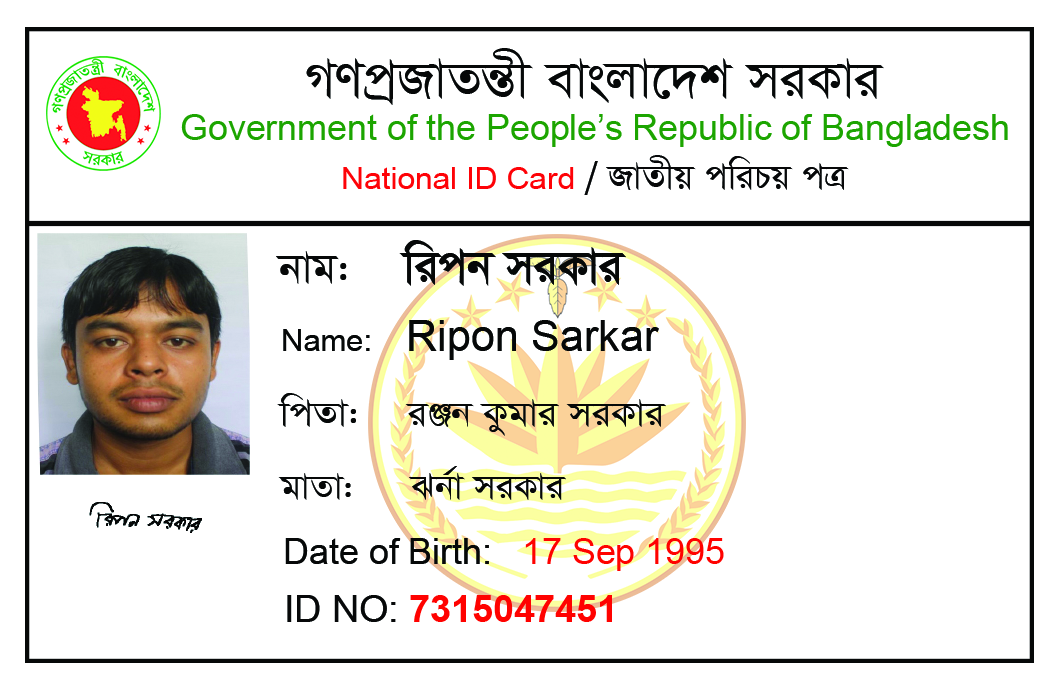
<style>
.page{position:relative;width:1050px;height:690px;background:#ffffff}
.page>*{position:absolute;margin:0}
.t1{font:62.9px "SutonnyMJ";color:#000000}
.t2{font:35.5px "ArialMT";color:#1ba400}
.t3{font:42.5px "SutonnyMJ";color:#070809}
.t4{font:31.3px "ArialMT";color:#fe0207}
.t5{font:54.7px "SutonnyMJBold";color:#000000}
.t6{font:50.8px "SutonnyMJ";color:#000000}
.t7{font:43.1px "ArialMT";color:#000000}
.t8{font:30.8px "ArialMT";color:#000000}
.t9{font:43.5px "SutonnyMJ";color:#000000}
.t10{font:41.7px "SutonnyMJ";color:#000000}
.t11{font:36.4px "ArialMT";color:#000000}
.t12{font:36.4px "ArialMT";color:#ff0200}
.t13{font:37.3px "Arial-BoldMT";color:#ff0200}
.t14{font:37.3px "ArialMT";color:#070809}
</style>
<div class="page">
<p class="t1" style="left:306px;top:48px;width:578px;height:57px">MYcªRvZšÍx evsjv‡`k miKvi</p>
<p class="t2" style="left:181px;top:114px;width:827px;height:33px">Government of the People’s Republic of Bangladesh</p>
<p class="t3" style="left:584px;top:155px;width:265px;height:40px">/ RvZxq cwiPq cÎ</p>
<p class="t4" style="left:343px;top:167px;width:231px;height:22px">National ID Card</p>
<p class="t5" style="left:276px;top:240px;width:350px;height:46px"><span class="t6">bvg:    </span>wicb miKvi</p>
<p class="t7" style="left:283px;top:320px;width:376px;height:40px"><span class="t8">Name:    </span>Ripon Sarkar</p>
<p class="t9" style="left:277px;top:393px;width:389px;height:43px">wcZv:    iÄb Kzgvi miKvi</p>
<p class="t10" style="left:278px;top:466px;width:288px;height:34px">gvZv:     Sb©v miKvi</p>
<p class="t11" style="left:285px;top:538px;width:439px;height:33px">Date of Birth:   <span class="t12">17 Sep 1995</span></p>
<p class="t13" style="left:287px;top:595px;width:325px;height:27px"><span class="t14">ID NO: </span>7315047451</p>
</div>
